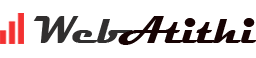
<style>
.page{position:relative;width:256px;height:58px;background:#ffffff}
.page>*{position:absolute;margin:0}
.t1{font:40px "Magneto-Bold";color:#170303}
.t2{font:40px "Magneto-Bold";color:#312f2f}
</style>
<div class="page">
<p class="t1" style="left:33px;top:16px;width:223px;height:29px"><span class="t2">Web</span>Atithi</p>
</div>
